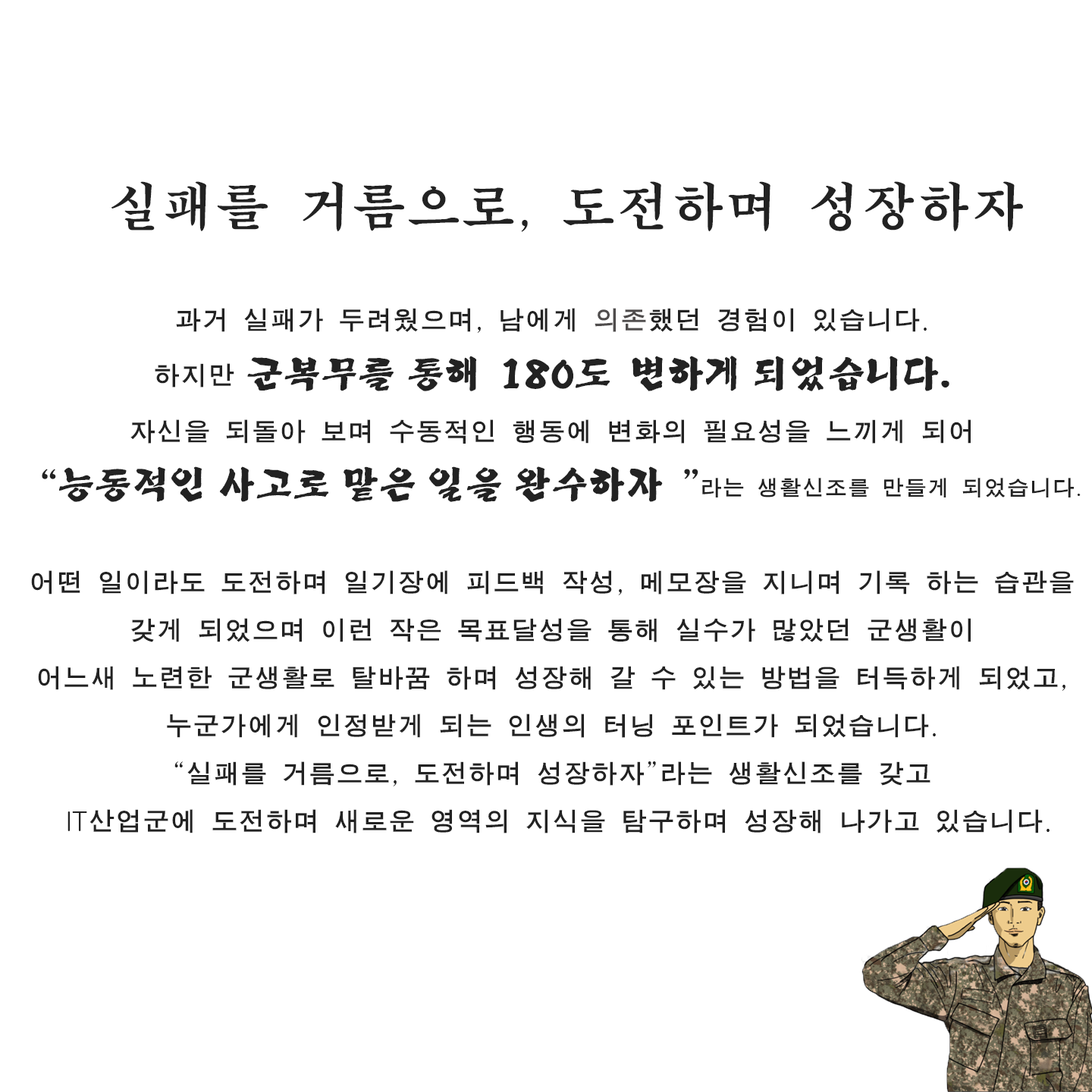
<style>
.page{position:relative;width:1092px;height:1092px;background:#ffffff}
.page>*{position:absolute;margin:0}
.t1{font:27.3px "MJemokGothic";color:#222222}
.t2{font:18.2px "Gulim";color:#222222}
.t3{font:54.6px "MJemokBatang";color:#222222}
.t4{font:54.6px "Gulim";color:#222222}
.t5{font:27.3px "Gulim";color:#222222}
.t6{font:27.3px "MJemokGothic";color:#4f4c4c}
.t7{font:36.4px "Yj-BACDOO-Bold";color:#222222}
.t8{font:22.7px "MJemokGothic";color:#222222}
.t9{font:22.7px "Gulim";color:#222222}
</style>
<div class="page">
<p class="t1" style="left:31px;top:181px;width:1050px;height:652px;text-align:center"><span class="t2"><br><br> </span><span class="t3">실패를 거름으로</span><span class="t4">,</span><span class="t3"> 도전하며 성장하자 <br><br></span>과거 실패가 두려웠으며<span class="t5">,</span> 남에게 <span class="t6">의존</span>했던 경험이 있습니다<span class="t5">. <br></span>하지만 <span class="t7">군복무를 통해 180도 변하게 되었습니다. <br></span>자신을 되돌아 보며 수동적인 행동에 변화의 필요성을 느끼게 되어 <br><span class="t7">“능동적인 사고로 맡은 일을 완수하자”</span><span class="t8">라는 생활신조를 만들게 되었습니다</span><span class="t9">.<br> <br></span>어떤 일이라도 도전하며 일기장에 피드백 작성<span class="t5">,</span> 메모장을 지니며 기록 하는 습관을 갖게 되었으며 이런 작은 목표달성을 통해 실수가 많았던 군생활이 <br>어느새 노련한 군생활로 탈바꿈 하며 성장해 갈 수 있는 방법을 터득하게 되었고<span class="t5">,</span> <br>누군가에게 인정받게 되는 인생의 터닝 포인트가 되었습니다<span class="t5">. <br>“</span>실패를 거름으로<span class="t5">,</span> 도전하며 성장하자<span class="t5">”</span>라는 생활신조를 갖고<br> <span class="t5">IT</span>산업군에 도전하며 새로운 영역의 지식을 탐구하며 성장해 나가고 있습니다<span class="t5">.</span></p>
</div>
